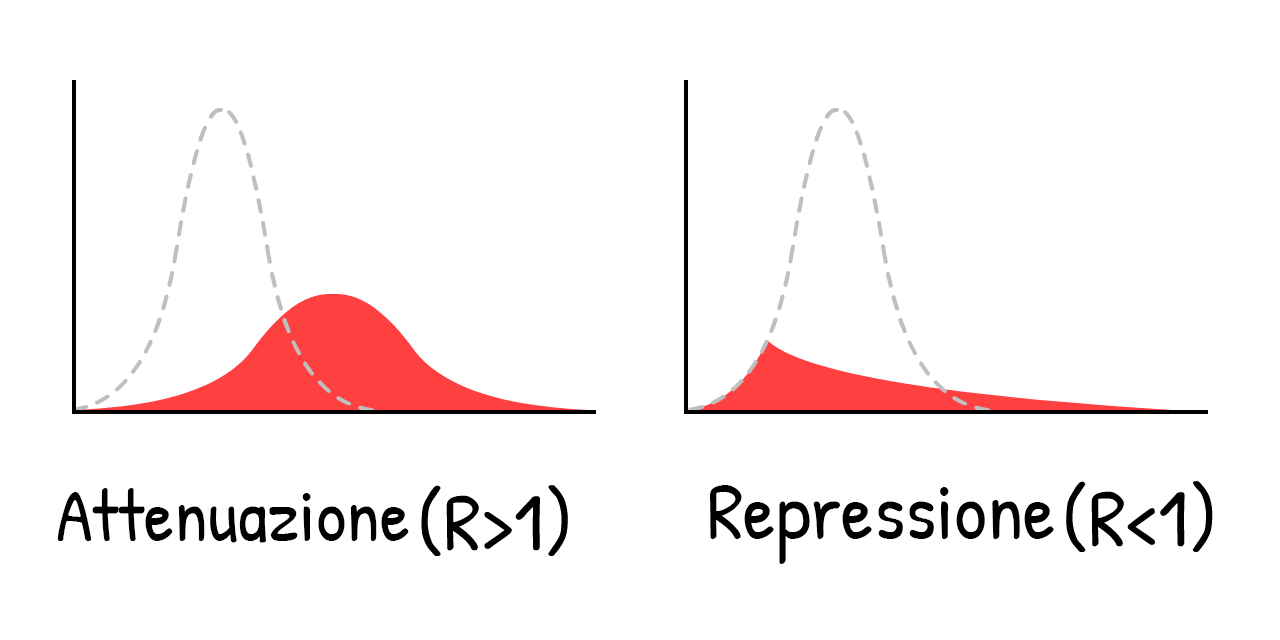
<style>
.page{position:relative;width:1280px;height:640px;background:#ffffff}
.page>*{position:absolute;margin:0}
.t1{font:81px "PatrickHand-Regular";color:#000000}
.t2{font:75px "PatrickHand-Regular";color:#000000}
</style>
<div class="page">
<p class="t1" style="left:710px;top:485px;width:344px;height:79px">Repressione</p>
<p class="t2" style="left:57px;top:488px;width:352px;height:55px">Attenuazione</p>
</div>
